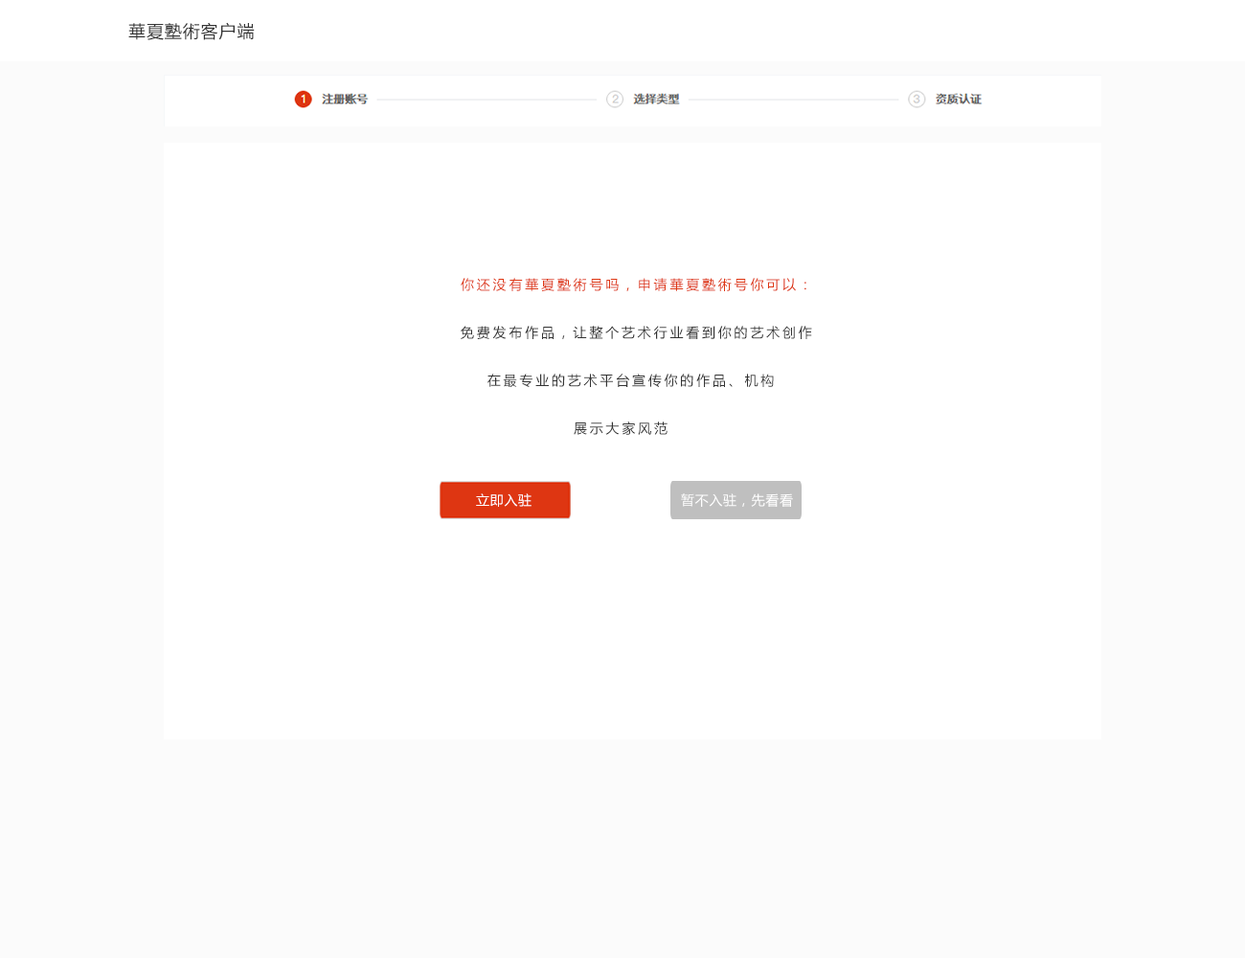
<style>
.page{position:relative;width:1245px;height:958px;background:#ffffff}
.page>*{position:absolute;margin:0}
.t1{font:17.2px "MicrosoftYaHei";letter-spacing:0.05em;color:#333333}
.t2{font:13.4px/28.7px "MicrosoftYaHei";letter-spacing:0.2em;color:#333333}
.t3{font:13.4px/28.7px "MicrosoftYaHei";letter-spacing:0.2em;color:#de3612}
.t4{font:13.4px "MicrosoftYaHei";letter-spacing:0.05em;color:#ffffff}
</style>
<div class="page">
<p class="t1" style="left:128px;top:22px;width:127px;height:18px">華夏塾術客户端</p>
<p class="t2" style="left:461px;top:278px;width:351px;height:157px"><span class="t3">你还没有華夏塾術号吗，申请華夏塾術号你可以：<br></span>免费发布作品，让整个艺术行业看到你的艺术创作<br>    在最专业的艺术平台宣传你的作品、机构<br>                 展示大家风范</p>
<p class="t4" style="left:476px;top:493px;width:56px;height:14px">立即入驻</p>
<p class="t4" style="left:681px;top:493px;width:112px;height:14px">暂不入驻，先看看</p>
</div>
